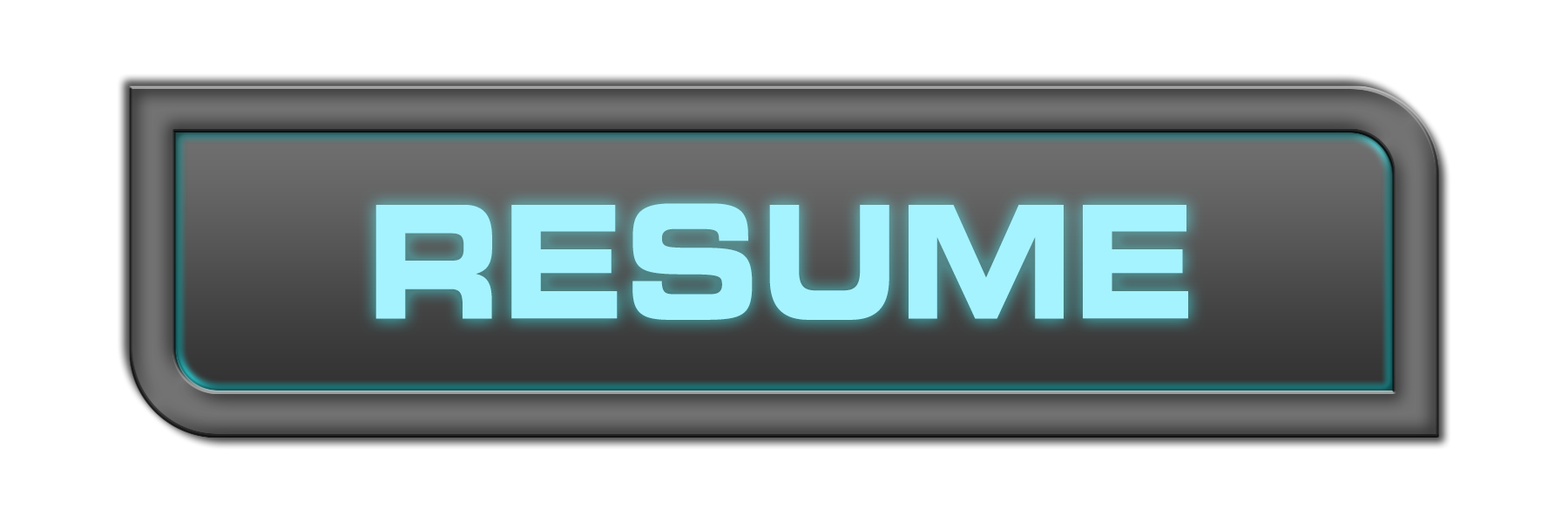
<style>
.page{position:relative;width:1568px;height:523px;background:#ffffff}
.page>*{position:absolute;margin:0}
.t1{font:156.8px "EurostileLTStd-BoldEx2";color:#a5f3ff;scale:0.83 1}
</style>
<div class="page">
<p class="t1" style="left:375px;top:203px;width:813px;height:117px">RESUME</p>
</div>
